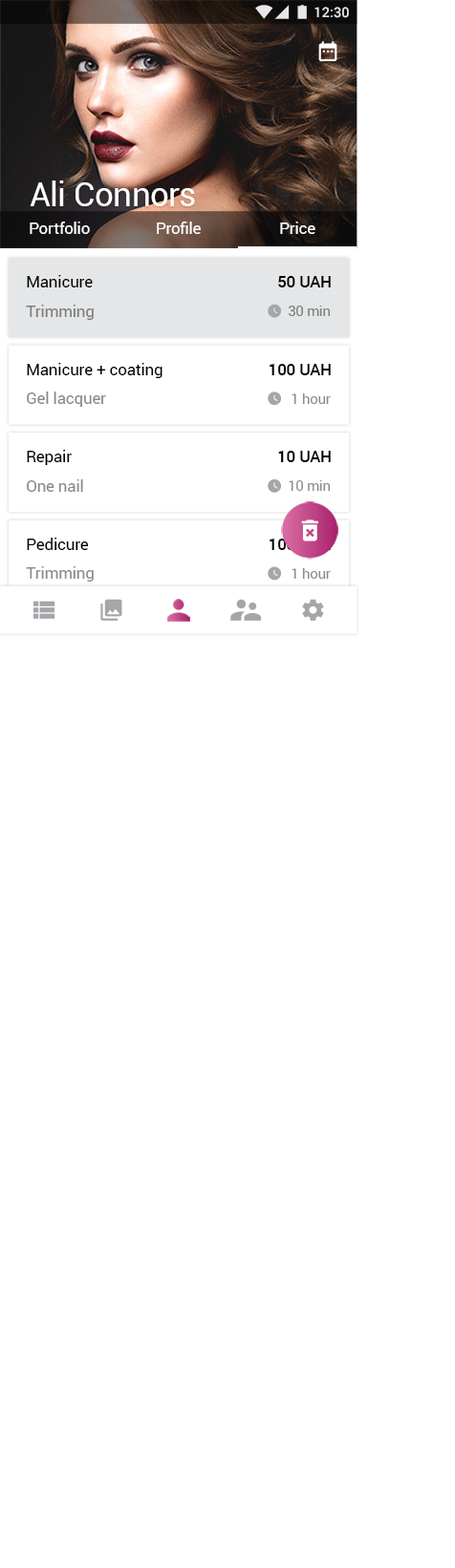
<style>
.page{position:relative;width:455px;height:1568px;background:#ffffff}
.page>*{position:absolute;margin:0}
.t1{font:13.9px "Roboto-Medium";color:#ffffff}
.t2{font:33.7px "Roboto-Regular";letter-spacing:-0.005em;color:#ffffff}
.t3{font:15.8px "Roboto-Regular";letter-spacing:0.01em;color:#ffffff}
.t4{font:15.8px "Roboto-Regular";color:#000000}
.t5{font:15.8px "Roboto-Medium";color:#000000}
.t6{font:15.8px "Roboto-Regular";color:#7d7e7e}
.t7{font:13.9px "Roboto-Regular";color:#7d7e7e}
.t8{font:15.8px "Roboto-Regular";color:#8b8b8b}
.t9{font:13.9px "Roboto-Regular";color:#8b8b8b}
.t10{font:15.8px "Roboto-Medium"}
</style>
<div class="page">
<p class="t1" style="left:314px;top:7px;width:35px;height:11px">12:30</p>
<p class="t2" style="left:30px;top:180px;width:165px;height:26px">Ali Connors</p>
<p class="t3" style="left:30px;top:222px;width:60px;height:12px">Portfolio</p>
<p class="t3" style="left:157px;top:222px;width:44px;height:12px">Profile</p>
<p class="t3" style="left:280px;top:222px;width:35px;height:12px">Price</p>
<p class="t4" style="left:27px;top:275px;width:66px;height:12px">Manicure</p>
<p class="t5" style="left:278px;top:276px;width:52px;height:11px">50 UAH</p>
<p class="t6" style="left:26px;top:305px;width:68px;height:15px">Trimming</p>
<p class="t7" style="left:288px;top:306px;width:42px;height:10px">30 min</p>
<p class="t4" style="left:27px;top:363px;width:135px;height:15px">Manicure + coating</p>
<p class="t5" style="left:269px;top:364px;width:61px;height:11px">100 UAH</p>
<p class="t8" style="left:27px;top:392px;width:79px;height:15px">Gel lacquer</p>
<p class="t9" style="left:291px;top:393px;width:39px;height:11px">1 hour</p>
<p class="t4" style="left:27px;top:450px;width:45px;height:15px">Repair</p>
<p class="t5" style="left:278px;top:451px;width:52px;height:11px">10 UAH</p>
<p class="t8" style="left:27px;top:479px;width:56px;height:13px">One nail</p>
<p class="t9" style="left:288px;top:480px;width:42px;height:11px">10 min</p>
<p class="t4" style="left:27px;top:538px;width:62px;height:12px">Pedicure</p>
<p class="t10" style="left:269px;top:539px;width:61px;height:11px">100 UAH</p>
<p class="t8" style="left:26px;top:566px;width:68px;height:16px">Trimming</p>
<p class="t9" style="left:291px;top:568px;width:39px;height:11px">1 hour</p>
</div>
